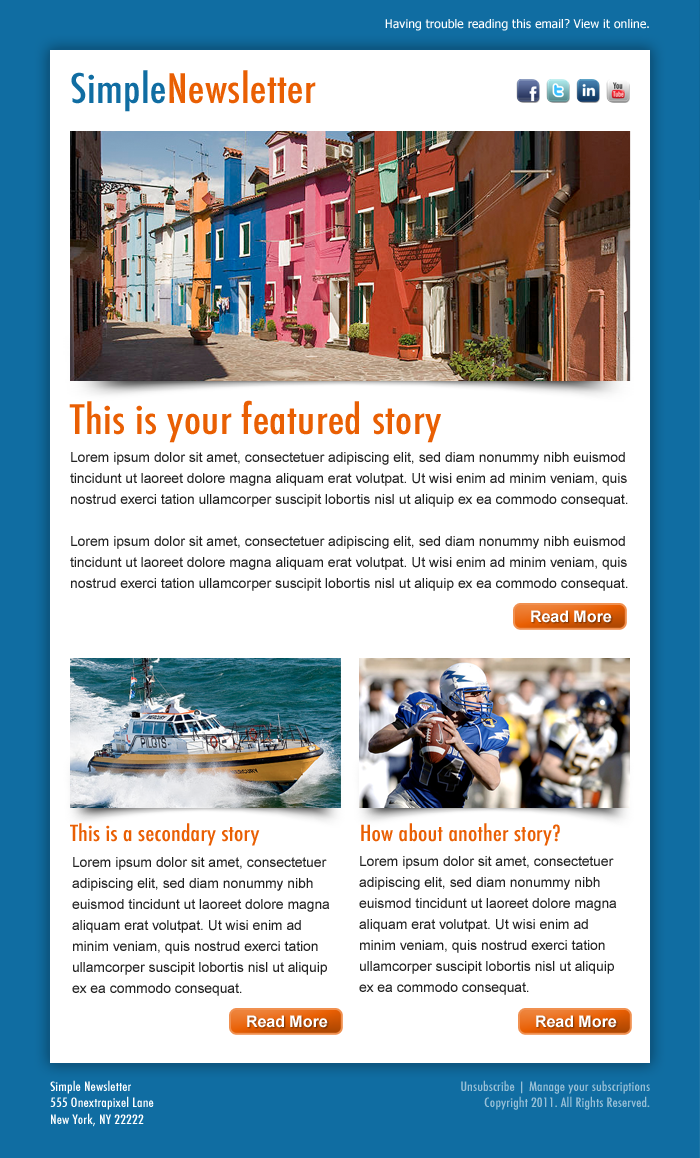
<style>
.page{position:relative;width:700px;height:1158px;background:#ffffff}
.page>*{position:absolute;margin:0}
.t1{font:12px "Tahoma";letter-spacing:0.01em;color:#ffffff}
.t2{font:39.6px "Futura-CondensedMedium";letter-spacing:0.01em;color:#e95f03;scale:1.11 1}
.t3{font:39.6px "Futura-CondensedMedium";letter-spacing:0.01em;color:#106da2;scale:1.11 1}
.t4{font:14px/21px "ArialMT";color:#222222}
.t5{font:16px "Arial-BoldMT";color:#ffffff}
.t6{font:21.6px "Futura-CondensedMedium";letter-spacing:0.01em;color:#e95f03;scale:1.11 1}
.t7{font:12.6px "Futura-CondensedMedium";letter-spacing:0.01em;color:#ffffff;scale:1.11 1}
.t8{font:12.6px "Futura-CondensedMedium";letter-spacing:0.01em;color:#98c0d7;scale:1.11 1}
</style>
<div class="page">
<p class="t1" style="left:385px;top:19px;width:264px;height:12px">Having trouble reading this email? View it online.</p>
<p class="t2" style="left:71px;top:70px;width:245px;height:42px"><span class="t3">Simple</span>Newsletter</p>
<p class="t2" style="left:69px;top:400px;width:372px;height:43px">This is your featured story</p>
<p class="t4" style="left:70px;top:452px;width:558px;height:139px">Lorem ipsum dolor sit amet, consectetuer adipiscing elit, sed diam nonummy nibh euismod tincidunt ut laoreet dolore magna aliquam erat volutpat. Ut wisi enim ad minim veniam, quis nostrud exerci tation ullamcorper suscipit lobortis nisl ut aliquip ex ea commodo consequat.<br><br>Lorem ipsum dolor sit amet, consectetuer adipiscing elit, sed diam nonummy nibh euismod tincidunt ut laoreet dolore magna aliquam erat volutpat. Ut wisi enim ad minim veniam, quis nostrud exerci tation ullamcorper suscipit lobortis nisl ut aliquip ex ea commodo consequat.</p>
<p class="t5" style="left:531px;top:610px;width:81px;height:13px">Read More</p>
<p class="t6" style="left:70px;top:823px;width:190px;height:23px">This is a secondary story</p>
<p class="t6" style="left:361px;top:823px;width:199px;height:23px">How about another story?</p>
<p class="t4" style="left:72px;top:857px;width:258px;height:139px">Lorem ipsum dolor sit amet, consectetuer adipiscing elit, sed diam nonummy nibh euismod tincidunt ut laoreet dolore magna aliquam erat volutpat. Ut wisi enim ad minim veniam, quis nostrud exerci tation ullamcorper suscipit lobortis nisl ut aliquip ex ea commodo consequat.</p>
<p class="t4" style="left:359px;top:856px;width:258px;height:139px">Lorem ipsum dolor sit amet, consectetuer adipiscing elit, sed diam nonummy nibh euismod tincidunt ut laoreet dolore magna aliquam erat volutpat. Ut wisi enim ad minim veniam, quis nostrud exerci tation ullamcorper suscipit lobortis nisl ut aliquip ex ea commodo consequat.</p>
<p class="t5" style="left:247px;top:1015px;width:81px;height:13px">Read More</p>
<p class="t5" style="left:536px;top:1015px;width:81px;height:13px">Read More</p>
<p class="t7" style="left:50px;top:1080px;width:104px;height:47px">Simple Newsletter<br>555 Onextrapixel Lane<br>New York, NY 22222</p>
<p class="t8" style="left:461px;top:1080px;width:189px;height:30px;text-align:right">Unsubscribe | Manage your subscriptions<br>Copyright 2011. All Rights Reserved.</p>
</div>
